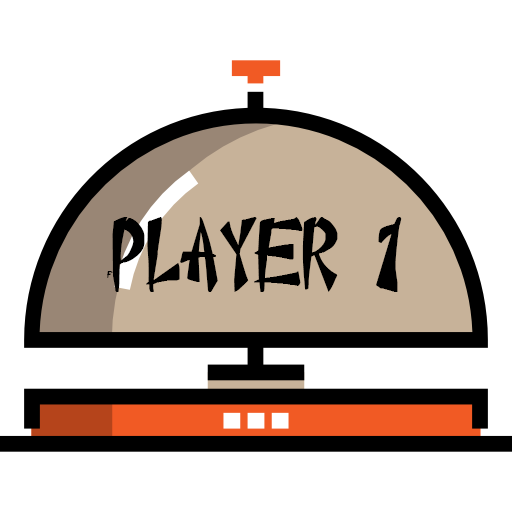
<style>
.page{position:relative;width:512px;height:512px;background:#ffffff}
.page>*{position:absolute;margin:0}
.t1{font:75px "ChineseTakeaway";color:#000000}
.t2{font:7.5px "ChineseTakeaway";color:#000000}
</style>
<div class="page">
<p class="t1" style="left:107px;top:217px;width:295px;height:75px"><span class="t2">f</span>Player 1</p>
</div>
